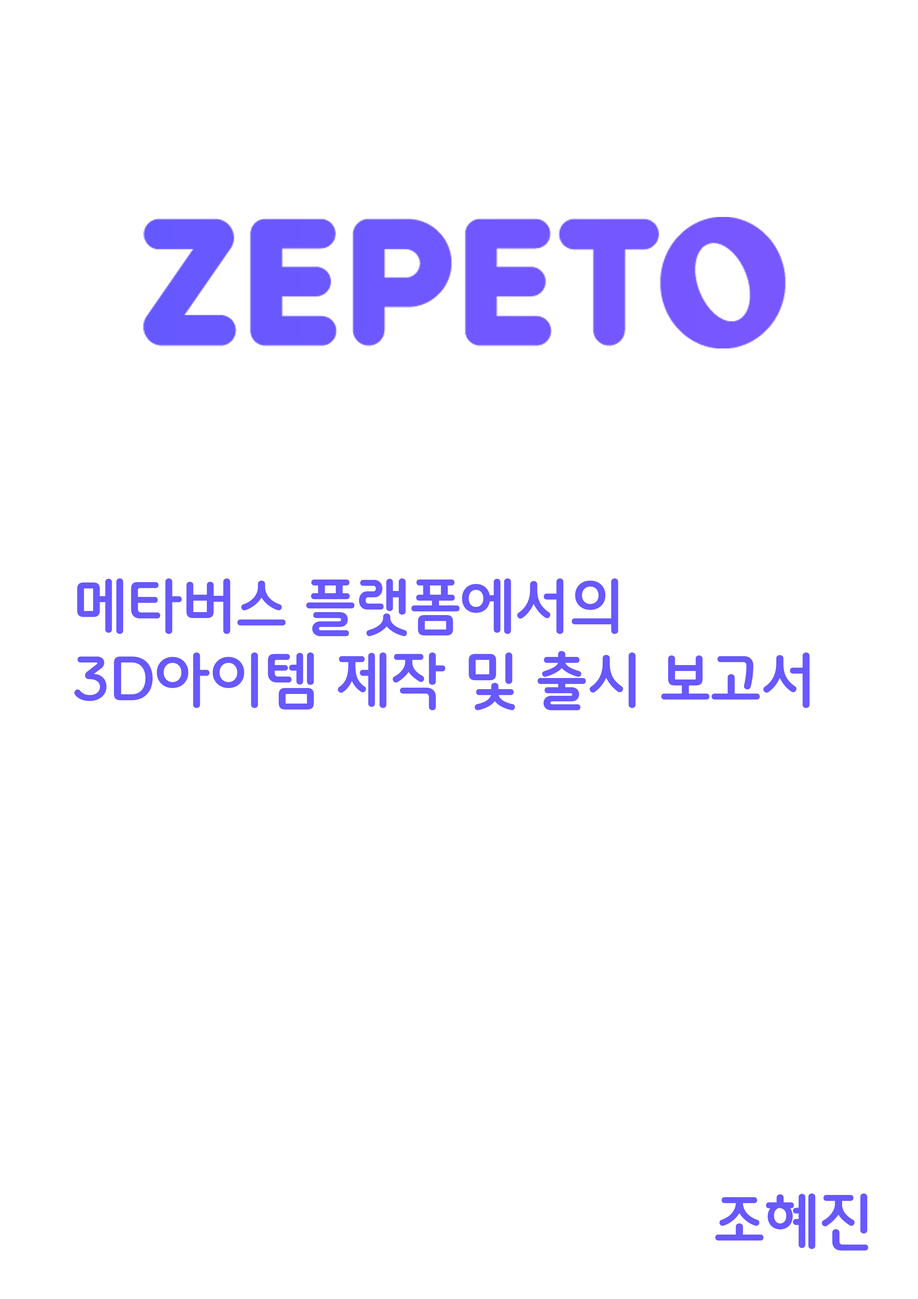
<style>
.page{position:relative;width:918px;height:1299px;background:#ffffff}
.page>*{position:absolute;margin:0}
.t1{font:61.7px "HancomMalangMalang-Bold";color:#6858ff}
</style>
<div class="page">
<p class="t1" style="left:74px;top:578px;width:736px;height:132px">메타버스 플랫폼에서의<br>3D아이템 제작 및 출시 보고서</p>
<p class="t1" style="left:715px;top:1193px;width:154px;height:57px">조혜진</p>
</div>
